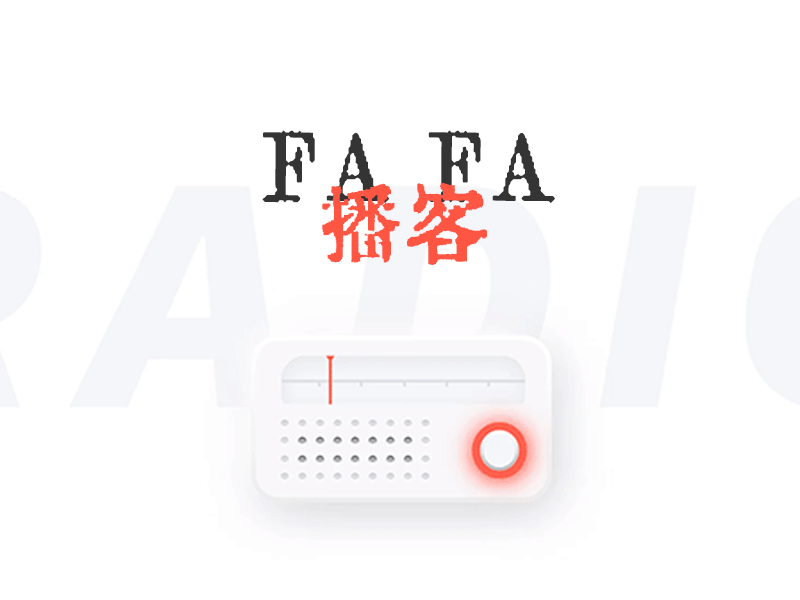
<style>
.page{position:relative;width:800px;height:600px;background:#ffffff}
.page>*{position:absolute;margin:0}
.t1{font:102.4px "Oradano-mincho-GSRR";color:#343434}
.t2{font:87.8px "Oradano-mincho-GSRR";color:#ff5644}
</style>
<div class="page">
<p class="t1" style="left:262px;top:130px;width:293px;height:73px">FA FA</p>
<p class="t2" style="left:322px;top:183px;width:166px;height:83px">播客</p>
</div>
